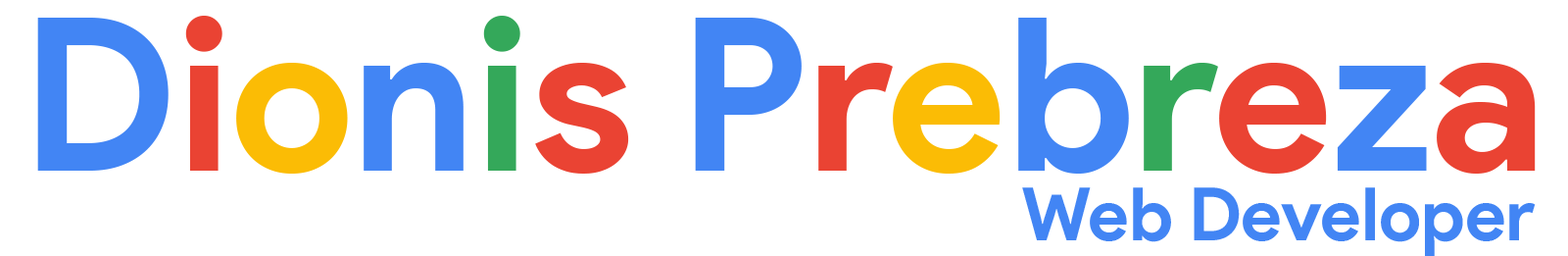
<style>
.page{position:relative;width:1568px;height:256px;background:#ffffff}
.page>*{position:absolute;margin:0}
.t1{font:213.8px "ProductSans-Bold";color:#4285f4}
.t2{font:213.8px "ProductSans-Bold";color:#ea4333}
.t3{font:213.8px "ProductSans-Bold";color:#fbbc05}
.t4{font:213.8px "ProductSans-Bold";color:#34a85a}
.t5{font:73.5px "ProductSans-Bold";color:#4285f4}
</style>
<div class="page">
<p class="t1" style="left:37px;top:16px;width:1499px;height:157px">D<span class="t2">i</span><span class="t3">o</span>n<span class="t4">i</span><span class="t2">s </span>P<span class="t2">r</span><span class="t3">e</span>b<span class="t4">r</span><span class="t2">e</span>z<span class="t2">a</span></p>
<p class="t5" style="left:1022px;top:187px;width:514px;height:70px">Web Developer</p>
</div>
